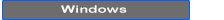
<style>
.page{position:relative;width:224px;height:20px;background:#6e6c6c}
.page>*{position:absolute;margin:0}
.t1{font:10.2px "ArialRoundedMTBold";color:#fcfcfc;scale:1.47 1}
</style>
<div class="page">
<p class="t1" style="left:61px;top:5px;width:66px;height:8px">Windows</p>
</div>
